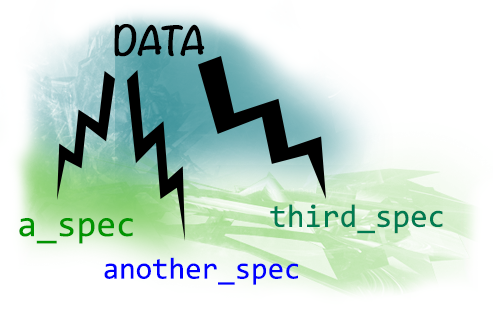
<style>
.page{position:relative;width:500px;height:309px;background:#ffffff}
.page>*{position:absolute;margin:0}
.t1{font:36px "Noteworthy-Bold";color:#000000}
.t2{font:32px "Consolas";color:#007b51}
.t3{font:36px "Consolas";color:#009400}
.t4{font:30px "Consolas";color:#0000ff}
</style>
<div class="page">
<p class="t1" style="left:114px;top:24px;width:91px;height:33px">DATA</p>
<p class="t2" style="left:270px;top:204px;width:173px;height:30px">third_spec</p>
<p class="t3" style="left:19px;top:218px;width:114px;height:26px">a_spec</p>
<p class="t4" style="left:104px;top:257px;width:194px;height:28px">another_spec</p>
</div>
